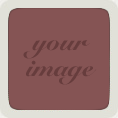
<style>
.page{position:relative;width:118px;height:118px;background:#855454}
.page>*{position:absolute;margin:0}
.t1{font:26px/26px "SnellRoundhand-Black";color:#673d3d}
</style>
<div class="page">
<p class="t1" style="left:23px;top:40px;width:74px;height:45px;text-align:center">your<br>image</p>
</div>
